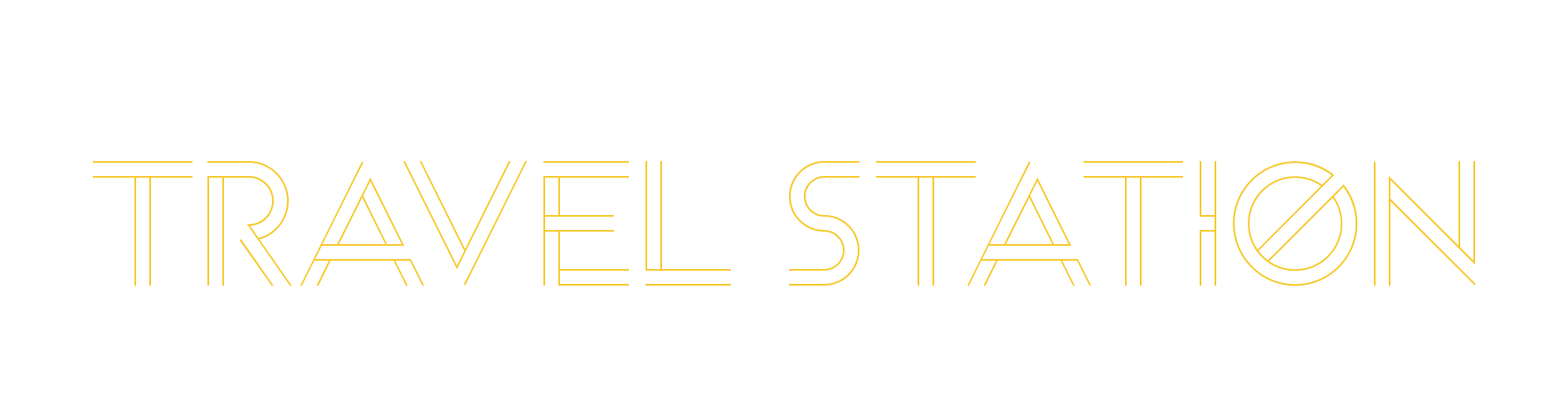
<style>
.page{position:relative;width:1568px;height:406px;background:#ffffff}
.page>*{position:absolute;margin:0}
.t1{font:165.9px "Arenq";color:#f6ca31}
</style>
<div class="page">
<p class="t1" style="left:93px;top:161px;width:1382px;height:125px">Travel Station</p>
</div>
